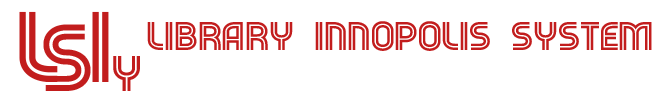
<style>
.page{position:relative;width:671px;height:100px;background:#ffffff}
.page>*{position:absolute;margin:0}
.t1{font:40px "SociumFree-Regular";color:#c21d1d}
</style>
<div class="page">
<p class="t1" style="left:147px;top:21px;width:505px;height:30px">Library Innopolis System</p>
</div>
